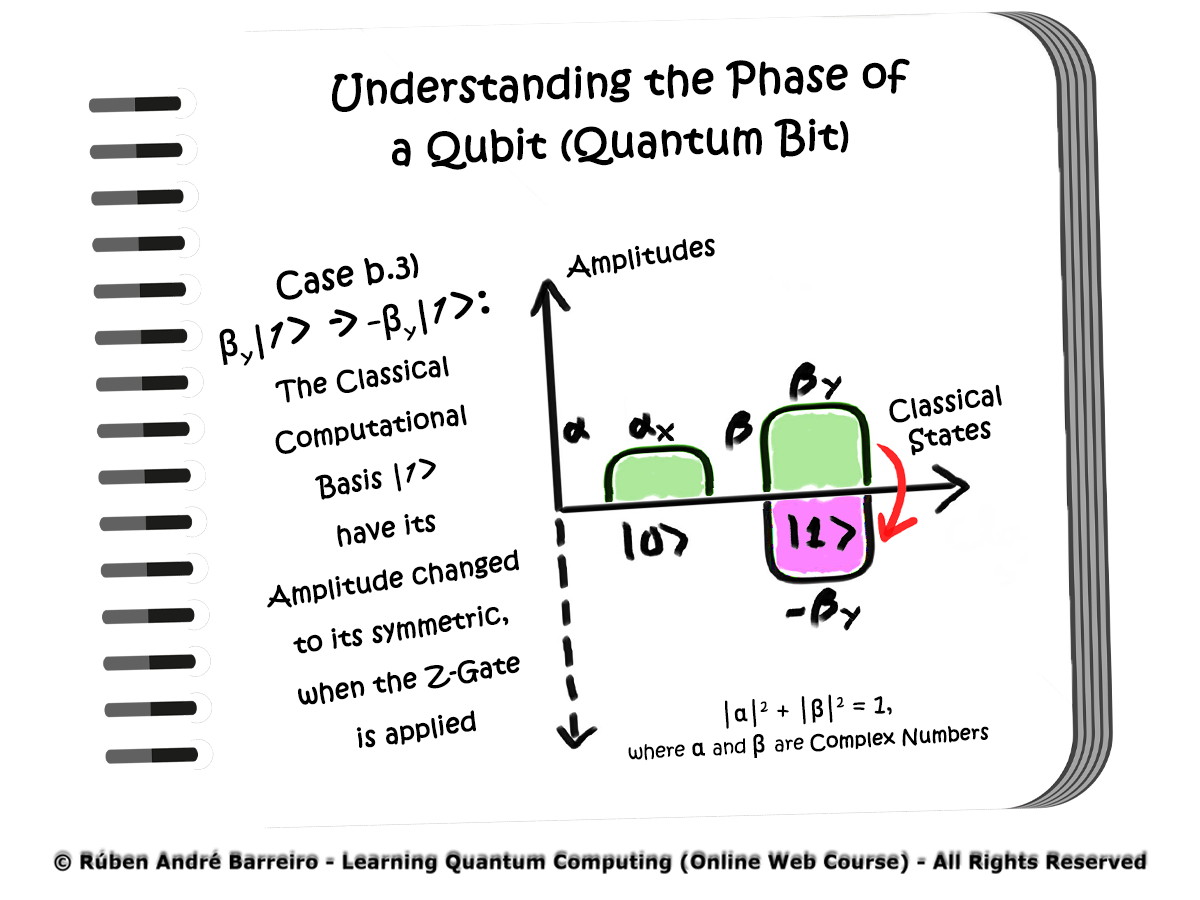
<style>
.page{position:relative;width:1200px;height:900px;background:#ffffff}
.page>*{position:absolute;margin:0}
.t1{font:40px "KristenITC-Regular";color:#000000;font-weight:bold}
.t2{font:25.6px "KristenITC-Regular";color:#000000;font-weight:bold}
.t3{font:25.4px/50.9px "KristenITC-Regular";color:#000000;font-weight:bold}
.t4{font:31.8px/50.9px "KristenITC-Regular";color:#000000;font-weight:bold}
.t5{font:38.2px/31.8px "Bahnschrift";color:#000000}
.t6{font:30.5px/50.9px "KristenITC-Regular";color:#000000;scale:1.67 1}
.t7{font:50.9px/50.9px "FreestyleScript-Regular";color:#000000;font-weight:bold}
.t8{font:50.9px/50.9px "KristenITC-Regular";color:#000000}
.t9{font:50.9px/50.9px "KristenITC-Regular";letter-spacing:-0.2em;color:#000000}
.t10{font:38.2px/50.9px "FreestyleScript-Regular";color:#000000;font-weight:bold}
.t11{font:38.2px/50.9px "KristenITC-Regular";color:#000000}
.t12{font:25.6px/32px "KristenITC-Regular";color:#000000;font-weight:bold}
.t13{font:19.2px/32px "KristenITC-Regular";color:#000000;font-weight:bold}
.t14{font:25.6px/32px "KristenITC-Regular";color:#000000}
.t15{font:25.6px/32px "Bahnschrift";color:#000000}
.t16{font:19.2px/32px "KristenITC-Regular";color:#000000}
</style>
<div class="page">
<p class="t1" style="left:332px;top:58px;width:578px;height:112px;rotate:-2deg">Understanding the Phase of a Qubit (Quantum Bit)</p>
<p class="t2" style="left:566px;top:238px;width:149px;height:40px;rotate:-9deg">Amplitudes</p>
<p class="t3" style="left:219px;top:253px;width:301px;height:495px;text-align:center;rotate:-9deg"><span class="t4">Case b.3)<br></span><span class="t5">β</span><span class="t6">y</span><span class="t4">|</span><span class="t7">1</span><span class="t8">&gt; </span><span class="t9">-&gt; </span><span class="t6">-</span><span class="t5">β</span><span class="t6">y</span><span class="t4">|</span><span class="t7">1</span><span class="t8">&gt;:<br></span>The Classical<br>Computational<br>Basis |<span class="t10">1</span><span class="t11">&gt;</span><br>have its<br>Amplitude changed to its symmetric,<br>when the Z-Gate<br>is applied</p>
<p class="t12" style="left:889px;top:384px;width:113px;height:72px;text-align:center;rotate:-9deg">Classical<br>States</p>
<p class="t13" style="left:628px;top:694px;width:361px;height:67px;text-align:center;rotate:-3deg"><span class="t14">|</span><span class="t15">α</span><span class="t14">|2 + |</span><span class="t15">β</span><span class="t14">|2 = 1,<br></span><span class="t16">where </span><span class="t15">α </span><span class="t16">and </span><span class="t15">β </span><span class="t16">are </span>Complex Numbers</p>
</div>
